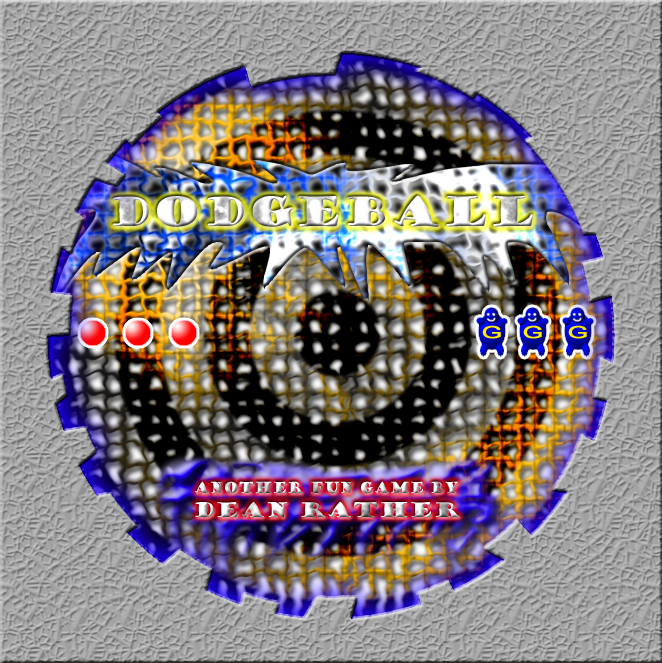
<style>
.page{position:relative;width:662px;height:663px}
.page>*{position:absolute;margin:0}
.t1{font:40px "GoudyStout"}
.t2{font:15px "GoudyStout";scale:0.8 1}
.t3{font:20px "GoudyStout"}
</style>
<div class="page">
<p class="t1" style="left:112px;top:195px;width:421px;height:32px">Dodgeball</p>
<p class="t2" style="left:195px;top:481px;width:265px;height:37px;text-align:center">ANOTHER Fun Game by<br><span class="t3">Dean Rather</span></p>
</div>
